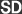
<style>
.page{position:relative;width:22px;height:14px;background:#333333}
.page>*{position:absolute;margin:0}
.t1{font:17.1px "YDIYGO340";color:#ffffff;font-weight:bold;scale:0.95 1}
</style>
<div class="page">
<p class="t1" style="left:0px;top:0px;width:22px;height:14px">SD</p>
</div>
